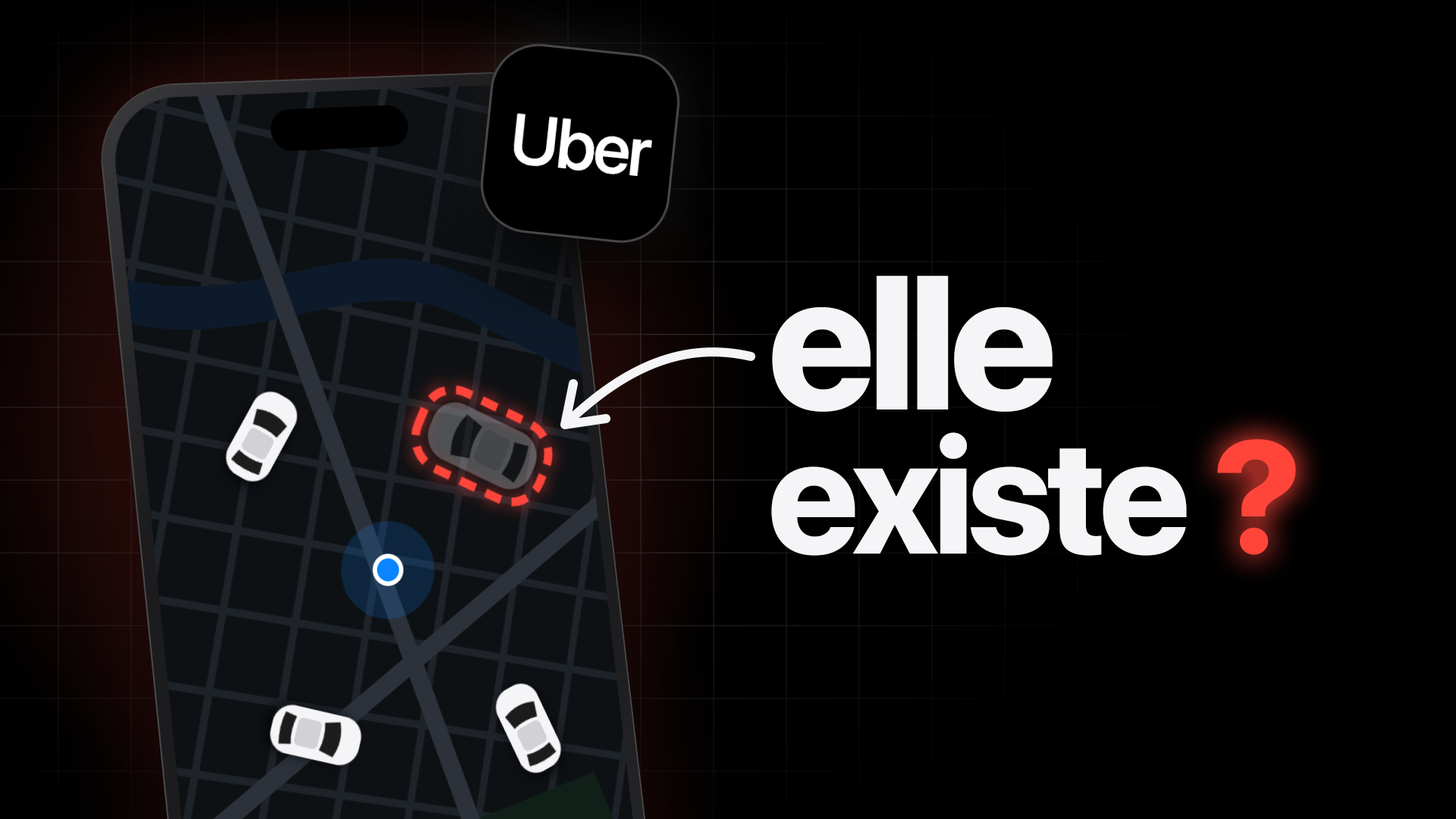
<style>
.page{position:relative;width:1456px;height:819px;background:#000000}
.page>*{position:absolute;margin:0}
.t1{font:189.6px ".SFNS-Regular";letter-spacing:-0.04em;color:#f5f5f7}
.t2{font:160.8px ".SFNS-Regular";letter-spacing:-0.04em;color:#f5f5f7}
.t3{font:160.8px ".SFNS-Regular";color:#ff453a}
</style>
<div class="page">
<p class="t1" style="left:771px;top:275px;width:282px;height:138px">elle</p>
<p class="t2" style="left:770px;top:432px;width:418px;height:125px">existe</p>
<p class="t3" style="left:1216px;top:439px;width:81px;height:117px">?</p>
</div>
